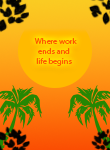
<style>
.page{position:relative;width:110px;height:150px}
.page>*{position:absolute;margin:0}
.t1{font:8.3px "MyriadPro-Regular";color:#ff5900}
</style>
<div class="page">
<p class="t1" style="left:34px;top:38px;width:43px;height:28px;text-align:center">Where work <br>ends and<br>life begins</p>
</div>
